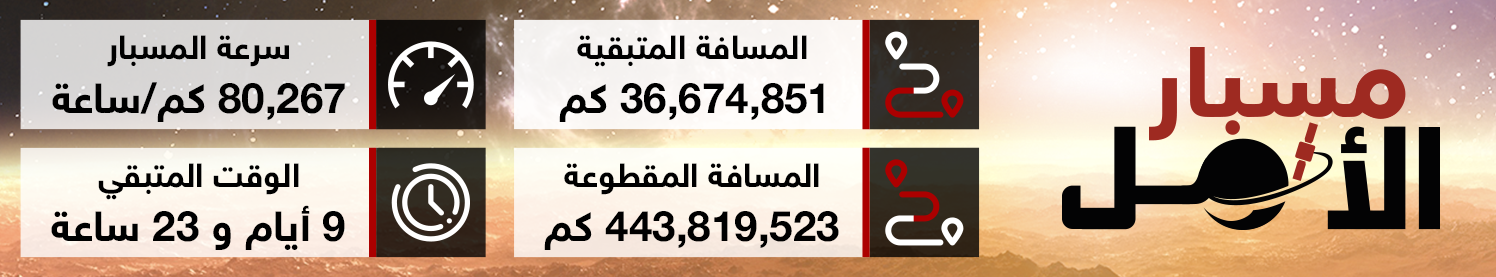
<style>
.page{position:relative;width:1496px;height:277px}
.page>*{position:absolute;margin:0}
.t1{font:33.5px "HelveticaNeueMEforSKY-Bold";color:#000000}
.t2{font:42.1px "HelveticaNeueMEforSKY-Bold";color:#000000}
</style>
<div class="page">
<p class="t1" style="left:107px;top:35px;width:182px;height:32px">سرعة المسبار</p>
<p class="t1" style="left:577px;top:35px;width:230px;height:32px">المسافة المتبقية</p>
<p class="t2" style="left:52px;top:82px;width:293px;height:40px">80,267 كم/ساعة</p>
<p class="t2" style="left:559px;top:83px;width:265px;height:39px">36,674,851 كم</p>
<p class="t1" style="left:98px;top:163px;width:201px;height:37px">الوقت المتبقي</p>
<p class="t1" style="left:564px;top:163px;width:255px;height:32px">المسافة المقطوعة</p>
<p class="t2" style="left:51px;top:205px;width:294px;height:45px">9 أيام و 23 ساعة</p>
<p class="t2" style="left:544px;top:211px;width:295px;height:39px">443,819,523 كم</p>
</div>
